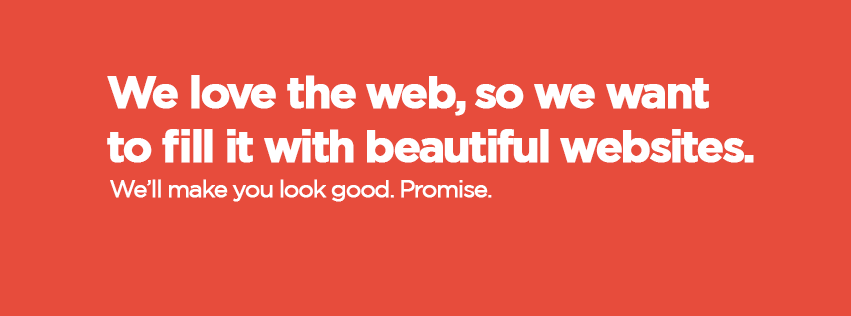
<style>
.page{position:relative;width:851px;height:316px;background:#e74c3c}
.page>*{position:absolute;margin:0}
.t1{font:45px "Gotham-Bold";letter-spacing:-0.075em;color:#ffffff;font-weight:bold}
.t2{font:24px "Gotham-Book";letter-spacing:-0.075em;color:#ffffff;font-weight:bold}
</style>
<div class="page">
<p class="t1" style="left:107px;top:75px;width:647px;height:88px">We love the web, so we want<br>to fill it with beautiful websites.</p>
<p class="t2" style="left:110px;top:179px;width:382px;height:23px">We’ll make you look good. Promise.</p>
</div>
